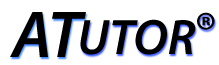
<style>
.page{position:relative;width:219px;height:65px;background:#ffffff}
.page>*{position:absolute;margin:0}
.t1{font:66.7px "MyriadPro-SemiboldIt";color:#000000}
.t2{font:50px "MyriadPro-SemiboldIt";color:#000000}
</style>
<div class="page">
<p class="t1" style="left:10px;top:12px;width:76px;height:45px">AT</p>
<p class="t2" style="left:197px;top:12px;width:18px;height:18px">®</p>
<p class="t2" style="left:80px;top:19px;width:116px;height:36px">UTOR</p>
</div>
